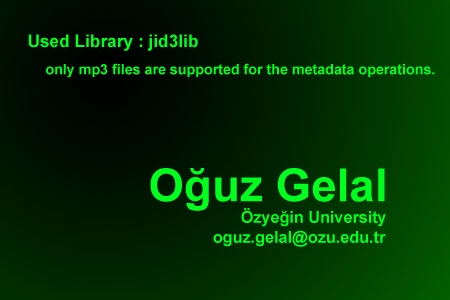
<style>
.page{position:relative;width:450px;height:300px}
.page>*{position:absolute;margin:0}
.t1{font:17.3px "Arial-BoldMT";color:#00ff1e}
.t2{font:14.3px "Arial-BoldMT";color:#00ff1e}
.t3{font:45.8px "Arial-BoldMT";color:#00ff1e}
.t4{font:16.2px "Arial-BoldMT";color:#00ff1e}
</style>
<div class="page">
<p class="t1" style="left:28px;top:34px;width:170px;height:17px">Used Library : jid3lib</p>
<p class="t2" style="left:46px;top:63px;width:389px;height:15px">only mp3 files are supported for the metadata operations.</p>
<p class="t3" style="left:150px;top:168px;width:235px;height:43px">Oğuz Gelal</p>
<p class="t4" style="left:241px;top:208px;width:145px;height:19px">Özyeğin University</p>
<p class="t4" style="left:213px;top:230px;width:173px;height:17px">oguz.gelal@ozu.edu.tr</p>
</div>
